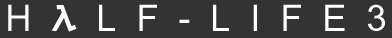
<style>
.page{position:relative;width:392px;height:38px;background:#333333}
.page>*{position:absolute;margin:0}
.t1{font:36px "HalfLife";color:#ffffff}
</style>
<div class="page">
<p class="t1" style="left:8px;top:4px;width:377px;height:28px">H  a  L  F  -  L  I  F  E  3</p>
</div>
